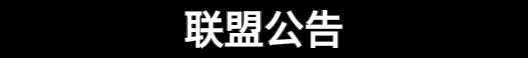
<style>
.page{position:relative;width:528px;height:58px;background:#000000}
.page>*{position:absolute;margin:0}
.t1{font:40px "WebPSD-18463539-0-Regular";color:#ffffff;font-weight:bold}
</style>
<div class="page">
<p class="t1" style="left:0px;top:0px;width:528px;height:58px">联盟公告</p>
</div>
